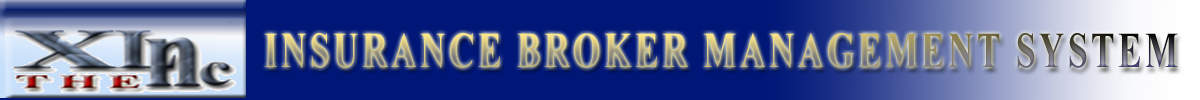
<style>
.page{position:relative;width:1200px;height:100px;background:#001778}
.page>*{position:absolute;margin:0}
.t1{font:50px "TimesNewRomanPS-BoldMT";letter-spacing:0.1em;scale:0.7 1}
</style>
<div class="page">
<p class="t1" style="left:264px;top:33px;width:914px;height:35px">INSURANCE BROKER MANAGEMENT SYSTEM</p>
</div>
